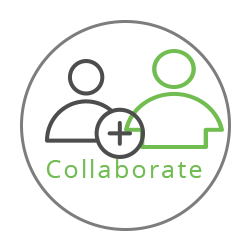
<style>
.page{position:relative;width:250px;height:250px;background:#ffffff}
.page>*{position:absolute;margin:0}
.t1{font:25.4px "OpenSans";letter-spacing:0.08em;color:#71bd51}
</style>
<div class="page">
<p class="t1" style="left:46px;top:159px;width:156px;height:19px">Collaborate</p>
</div>
